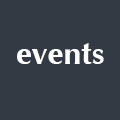
<style>
.page{position:relative;width:120px;height:120px;background:#323b44}
.page>*{position:absolute;margin:0}
.t1{font:32px "Optima-Bold";color:#ffffff}
</style>
<div class="page">
<p class="t1" style="left:17px;top:43px;width:87px;height:21px">events</p>
</div>
